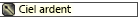
<style>
.page{position:relative;width:140px;height:19px;background:#ffffff}
.page>*{position:absolute;margin:0}
.t1{font:10.9px "LaoUI";color:#000000}
</style>
<div class="page">
<p class="t1" style="left:19px;top:5px;width:52px;height:8px">Ciel ardent</p>
</div>
